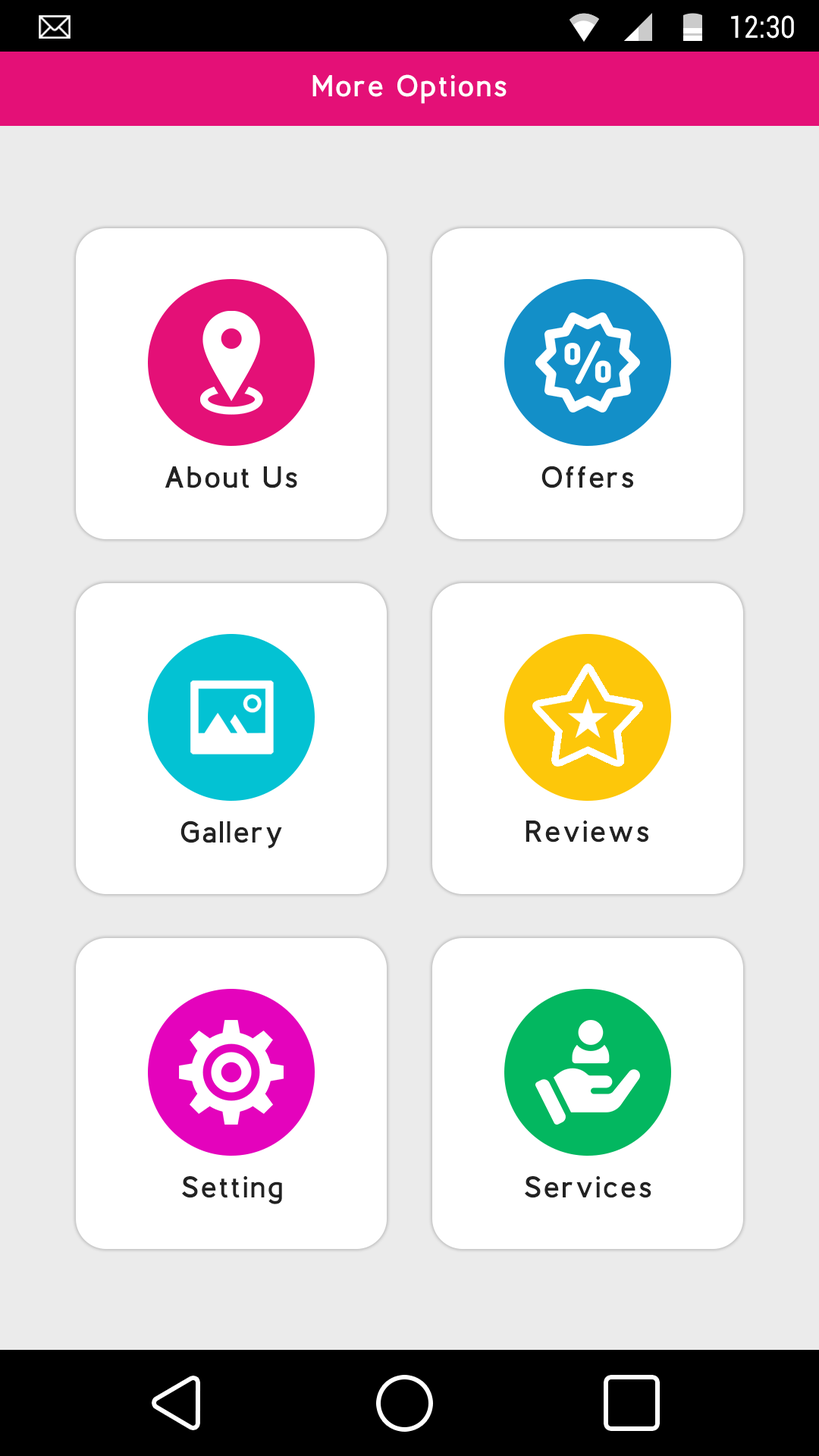
<style>
.page{position:relative;width:819px;height:1456px;background:#ffffff}
.page>*{position:absolute;margin:0}
.t1{font:30.5px "Roboto-Regular";color:#ffffff;scale:0.87 1}
.t2{font:30.3px "BerlinBold";letter-spacing:0.1em;color:#ffffff}
.t3{font:30.3px "BerlinBold";letter-spacing:0.1em;color:#222222}
</style>
<div class="page">
<p class="t1" style="left:731px;top:15px;width:63px;height:24px">12:30</p>
<p class="t2" style="left:312px;top:74px;width:195px;height:30px">More Options</p>
<p class="t3" style="left:165px;top:466px;width:132px;height:22px">About Us</p>
<p class="t3" style="left:541px;top:466px;width:93px;height:22px">Offers</p>
<p class="t3" style="left:180px;top:821px;width:102px;height:28px">Gallery</p>
<p class="t3" style="left:526px;top:821px;width:123px;height:21px">Reviews</p>
<p class="t3" style="left:182px;top:1176px;width:100px;height:28px">Setting</p>
<p class="t3" style="left:525px;top:1176px;width:126px;height:22px">Services</p>
</div>
